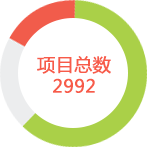
<style>
.page{position:relative;width:147px;height:147px;background:#ffffff}
.page>*{position:absolute;margin:0}
.t1{font:18px "MicrosoftYaHei";color:#f75b49;font-weight:bold}
</style>
<div class="page">
<p class="t1" style="left:37px;top:56px;width:74px;height:37px;text-align:center">项目总数<br>2992</p>
</div>
